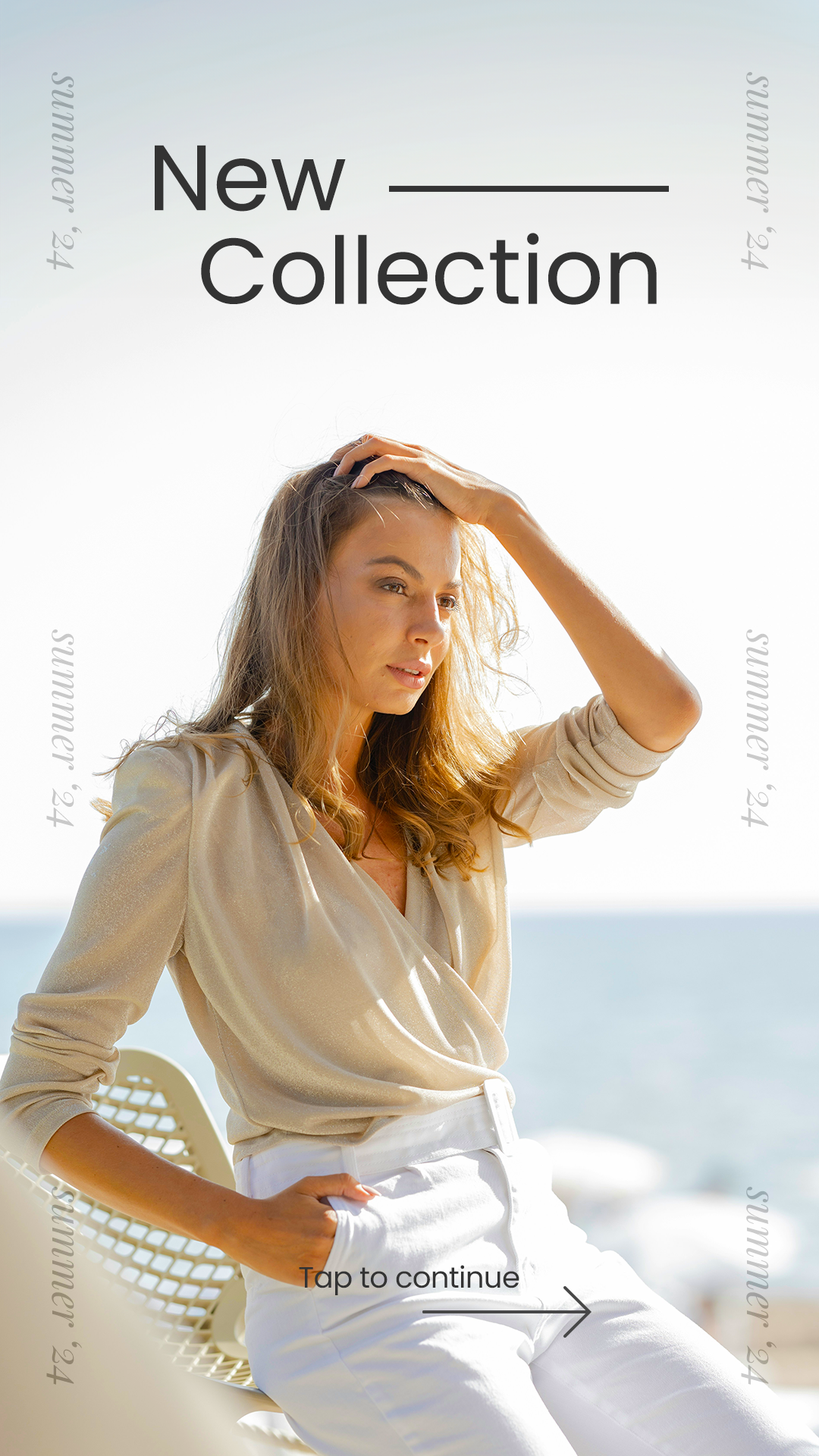
<style>
.page{position:relative;width:819px;height:1456px}
.page>*{position:absolute;margin:0}
.t1{font:40.6px "PlayfairDisplay-Italic";color:#a3acae}
.t2{font:40.6px "PlayfairDisplay-Italic";color:#b5b8b6}
.t3{font:92.8px/93.5px "Poppins-Regular";color:#333333}
.t4{font:40.6px "PlayfairDisplay-Italic";color:#c9c9c9}
.t5{font:40.6px "PlayfairDisplay-Italic";color:#cacaca}
.t6{font:40.6px "PlayfairDisplay-Italic";color:#9a8f7c}
.t7{font:40.6px "PlayfairDisplay-Italic"}
.t8{font:29.4px "Poppins-Regular";letter-spacing:-0.02em;color:#333333}
</style>
<div class="page">
<p class="t1" style="left:46px;top:72px;width:36px;height:198px;rotate:90deg">summer ‘24</p>
<p class="t2" style="left:741px;top:72px;width:36px;height:198px;rotate:90deg">summer ‘24</p>
<p class="t3" style="left:155px;top:145px;width:502px;height:160px">New <br>  Collection</p>
<p class="t4" style="left:46px;top:629px;width:36px;height:198px;rotate:90deg">summer ‘24</p>
<p class="t5" style="left:741px;top:629px;width:36px;height:198px;rotate:90deg">summer ‘24</p>
<p class="t6" style="left:46px;top:1187px;width:36px;height:198px;rotate:90deg">summer ‘24</p>
<p class="t7" style="left:741px;top:1187px;width:36px;height:198px;rotate:90deg">summer ‘24</p>
<p class="t8" style="left:299px;top:1265px;width:220px;height:30px">Tap to continue</p>
</div>
